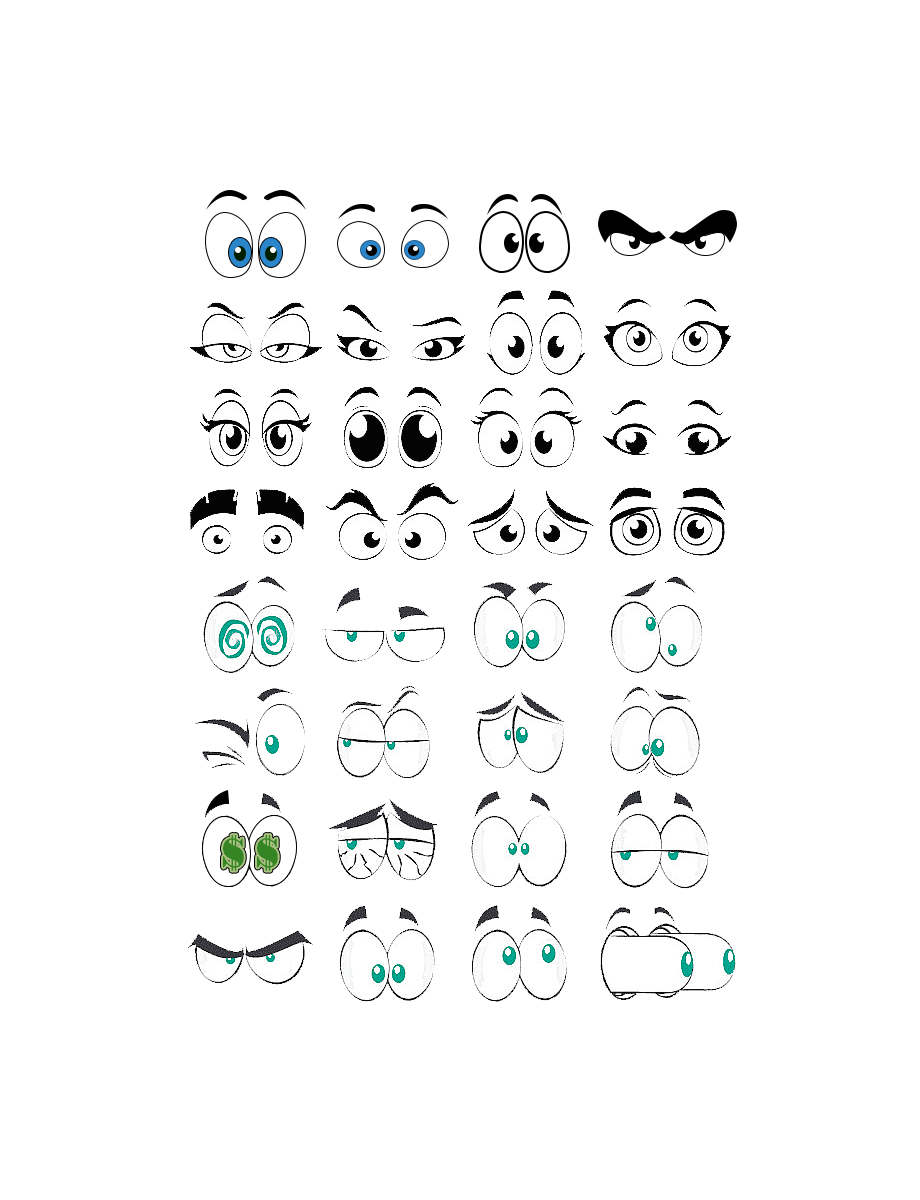
<style>
.page{position:relative;width:920px;height:1200px;background:#ffffff}
.page>*{position:absolute;margin:0}
.t1{font:40.6px "GravitasOne";letter-spacing:0.02em;color:#368524;scale:0.71 1}
</style>
<div class="page">
<p class="t1" style="left:223px;top:835px;width:21px;height:36px">$</p>
<p class="t1" style="left:257px;top:835px;width:21px;height:36px">$</p>
</div>
